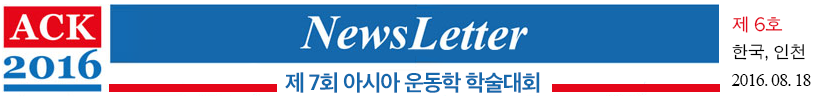
<style>
.page{position:relative;width:825px;height:100px;background:#ffffff}
.page>*{position:absolute;margin:0}
.t1{font:18px/28px "TimesNewRomanPSMT";letter-spacing:-0.05em;color:#000000}
.t2{font:18px/28px "AppleGothic";letter-spacing:-0.05em;color:#e4061b}
.t3{font:17px/28px "AppleGothic";letter-spacing:-0.04em;color:#000000}
.t4{font:23px/28px "AppleSDGothicNeo-Bold";letter-spacing:-0.05em;color:#1568ac}
.t5{font:18px/28px "AppleGothic";letter-spacing:-0.05em;color:#fefefe}
</style>
<div class="page">
<p class="t1" style="left:731px;top:16px;width:80px;height:70px"><span class="t2">제 6호<br></span><span class="t3">한국, 인천<br></span>2016. 08. 18</p>
<p class="t4" style="left:285px;top:72px;width:255px;height:21px"><span class="t5"> </span>제 7회 아시아 운동학 학술대회<br><span class="t5"><br>시아 운동학 학술대회</span></p>
</div>
